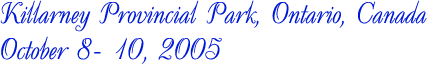
<style>
.page{position:relative;width:427px;height:64px;background:#ffffff}
.page>*{position:absolute;margin:0}
.t1{font:30px "UkrainianDecor";color:#0019d7}
</style>
<div class="page">
<p class="t1" style="left:0px;top:0px;width:427px;height:64px">Killarney Provincial Park, Ontario, Canada<br>October 8- 10, 2005</p>
</div>
